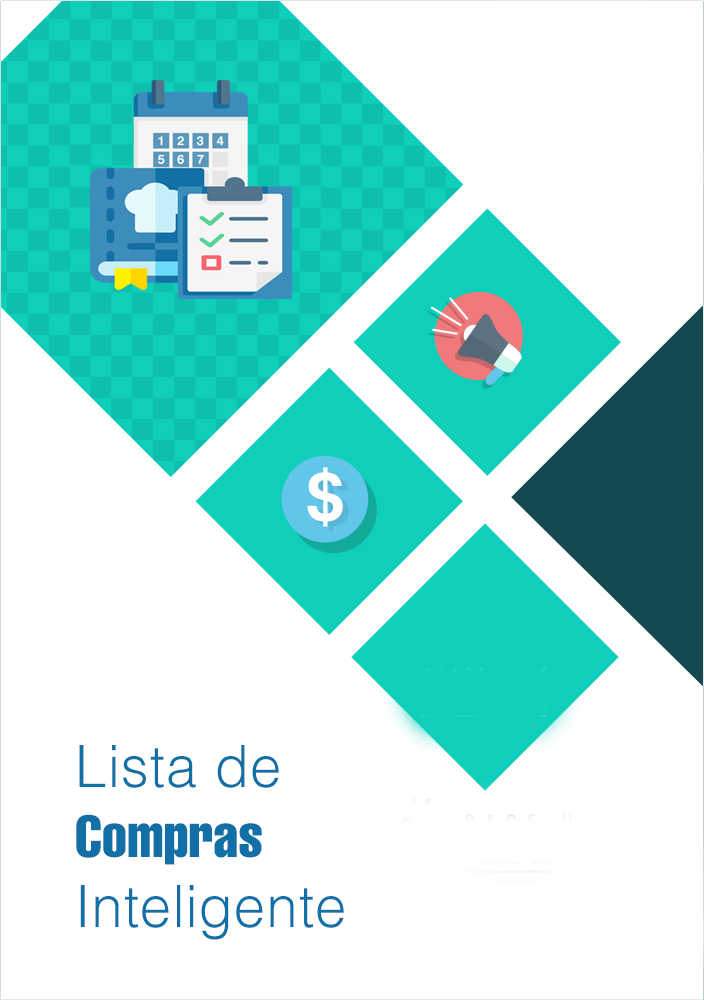
<style>
.page{position:relative;width:704px;height:1000px;background:#ffffff}
.page>*{position:absolute;margin:0}
.t1{font:58.3px "Helvetica-Light";color:#1370a6}
.t2{font:58.3px "Helvetica-Compressed";color:#1370a6}
</style>
<div class="page">
<p class="t1" style="left:76px;top:745px;width:268px;height:195px">Lista de<br><span class="t2">Compras<br></span>Inteligente</p>
</div>
